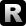
<style>
.page{position:relative;width:26px;height:26px;background:#000000}
.page>*{position:absolute;margin:0}
.t1{font:25px "Arial-Black";letter-spacing:0.075em}
</style>
<div class="page">
<p class="t1" style="left:5px;top:4px;width:18px;height:18px">R</p>
</div>
